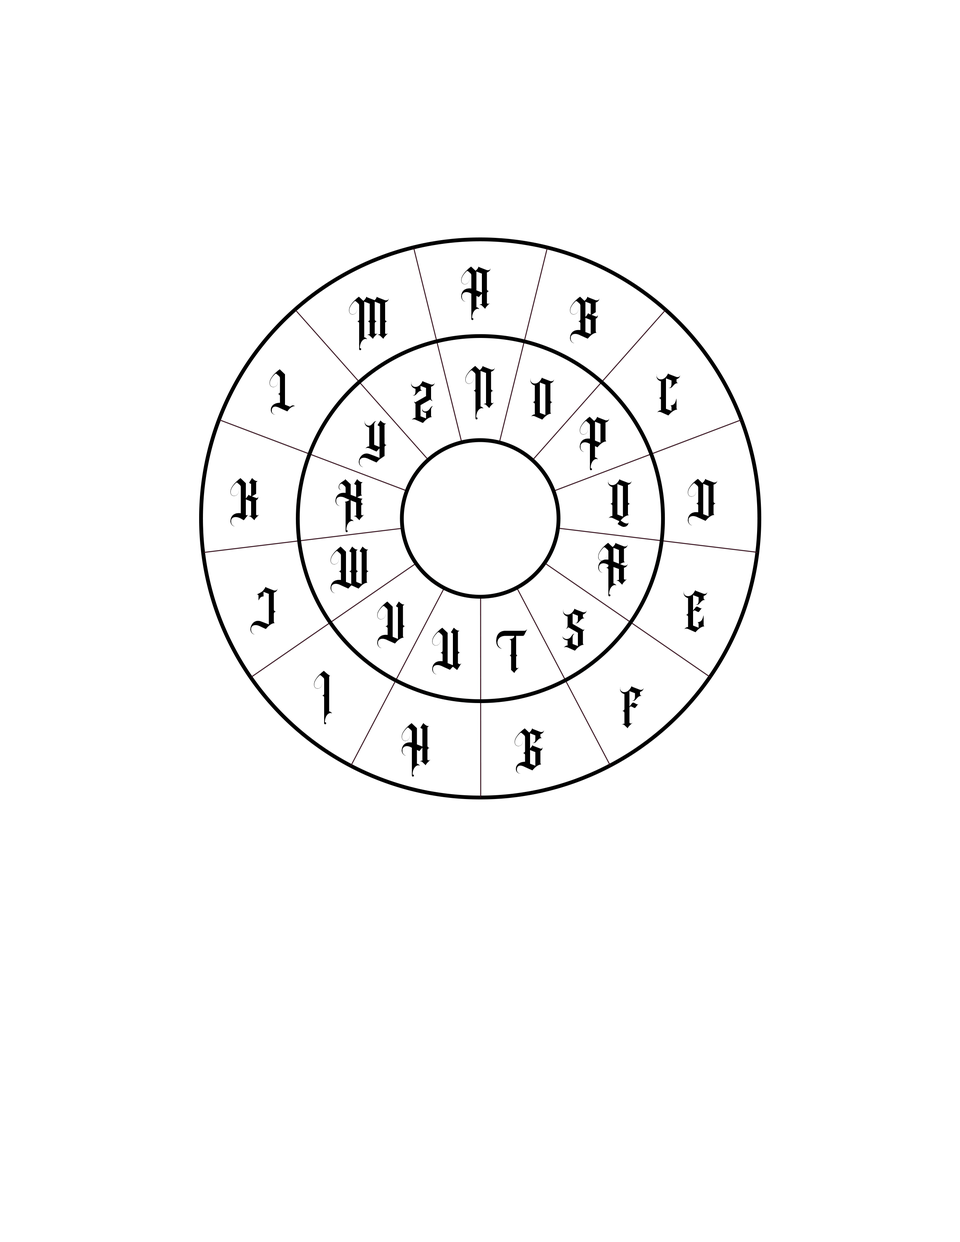
<style>
.page{position:relative;width:960px;height:1242px;background:#ffffff}
.page>*{position:absolute;margin:0}
.t1{font:56.5px "Angelwish-Regular";letter-spacing:0.14em;color:#000000}
</style>
<div class="page">
<p class="t1" style="left:461px;top:267px;width:29px;height:53px">A</p>
<p class="t1" style="left:349px;top:297px;width:40px;height:53px">M</p>
<p class="t1" style="left:570px;top:297px;width:29px;height:47px">B</p>
<p class="t1" style="left:465px;top:366px;width:30px;height:54px">N</p>
<p class="t1" style="left:270px;top:369px;width:25px;height:46px">L</p>
<p class="t1" style="left:530px;top:378px;width:24px;height:42px">O</p>
<p class="t1" style="left:657px;top:373px;width:23px;height:43px">C</p>
<p class="t1" style="left:411px;top:381px;width:24px;height:42px">Z</p>
<p class="t1" style="left:359px;top:420px;width:28px;height:48px">Y</p>
<p class="t1" style="left:580px;top:417px;width:29px;height:54px">P</p>
<p class="t1" style="left:230px;top:478px;width:29px;height:49px">K</p>
<p class="t1" style="left:335px;top:479px;width:29px;height:53px">X</p>
<p class="t1" style="left:608px;top:479px;width:24px;height:48px">Q</p>
<p class="t1" style="left:688px;top:479px;width:29px;height:47px">D</p>
<p class="t1" style="left:598px;top:543px;width:30px;height:54px">R</p>
<p class="t1" style="left:331px;top:547px;width:38px;height:47px">W</p>
<p class="t1" style="left:250px;top:587px;width:27px;height:48px">J</p>
<p class="t1" style="left:683px;top:590px;width:24px;height:42px">E</p>
<p class="t1" style="left:377px;top:602px;width:28px;height:47px">V</p>
<p class="t1" style="left:562px;top:609px;width:24px;height:42px">S</p>
<p class="t1" style="left:432px;top:628px;width:30px;height:47px">U</p>
<p class="t1" style="left:496px;top:629px;width:31px;height:44px">T</p>
<p class="t1" style="left:314px;top:671px;width:18px;height:54px">I</p>
<p class="t1" style="left:620px;top:686px;width:24px;height:43px">F</p>
<p class="t1" style="left:402px;top:723px;width:28px;height:54px">H</p>
<p class="t1" style="left:515px;top:728px;width:29px;height:46px">G</p>
</div>
